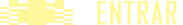
<style>
.page{position:relative;width:183px;height:25px;background:#ffffff}
.page>*{position:absolute;margin:0}
.t1{font:30px "AgencyFB-Reg";letter-spacing:0.04em;color:#fff79a;font-weight:bold}
</style>
<div class="page">
<p class="t1" style="left:97px;top:1px;width:80px;height:24px">ENTRAR</p>
</div>
